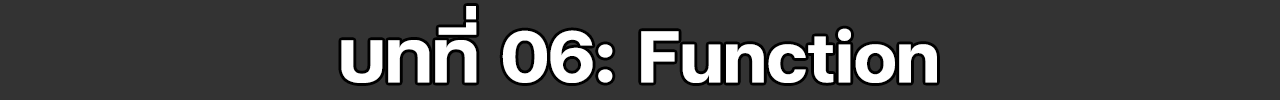
<style>
.page{position:relative;width:1280px;height:100px;background:#333333}
.page>*{position:absolute;margin:0}
.t1{font:100px "FCMinimalBold";color:#ffffff}
</style>
<div class="page">
<p class="t1" style="left:341px;top:6px;width:596px;height:77px">บทที่ 06: Function</p>
</div>
